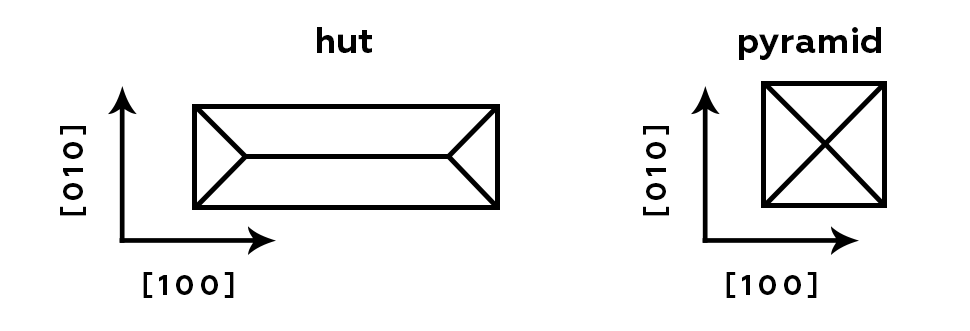
<style>
.page{position:relative;width:970px;height:331px;background:#ffffff}
.page>*{position:absolute;margin:0}
.t1{font:36px "Geometria-Bold";color:#000000}
.t2{font:28px "Geometria-Bold";letter-spacing:0.19em;color:#000000;text-transform:uppercase}
</style>
<div class="page">
<p class="t1" style="left:317px;top:27px;width:55px;height:26px">hut</p>
<p class="t1" style="left:739px;top:27px;width:142px;height:33px">pyramid</p>
<p class="t2" style="left:60px;top:126px;width:26px;height:90px;rotate:-90deg">[010]</p>
<p class="t2" style="left:643px;top:126px;width:26px;height:90px;rotate:-90deg">[010]</p>
<p class="t2" style="left:143px;top:272px;width:91px;height:26px">[100]</p>
<p class="t2" style="left:726px;top:272px;width:91px;height:26px">[100]</p>
</div>
